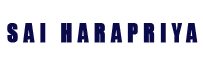
<style>
.page{position:relative;width:203px;height:66px;background:#ffffff}
.page>*{position:absolute;margin:0}
.t1{font:23.7px "Impact";letter-spacing:0.24em;color:#0a094a;font-weight:bold;scale:0.88 1}
</style>
<div class="page">
<p class="t1" style="left:7px;top:23px;width:191px;height:20px">SAI HARAPRIYA</p>
</div>
